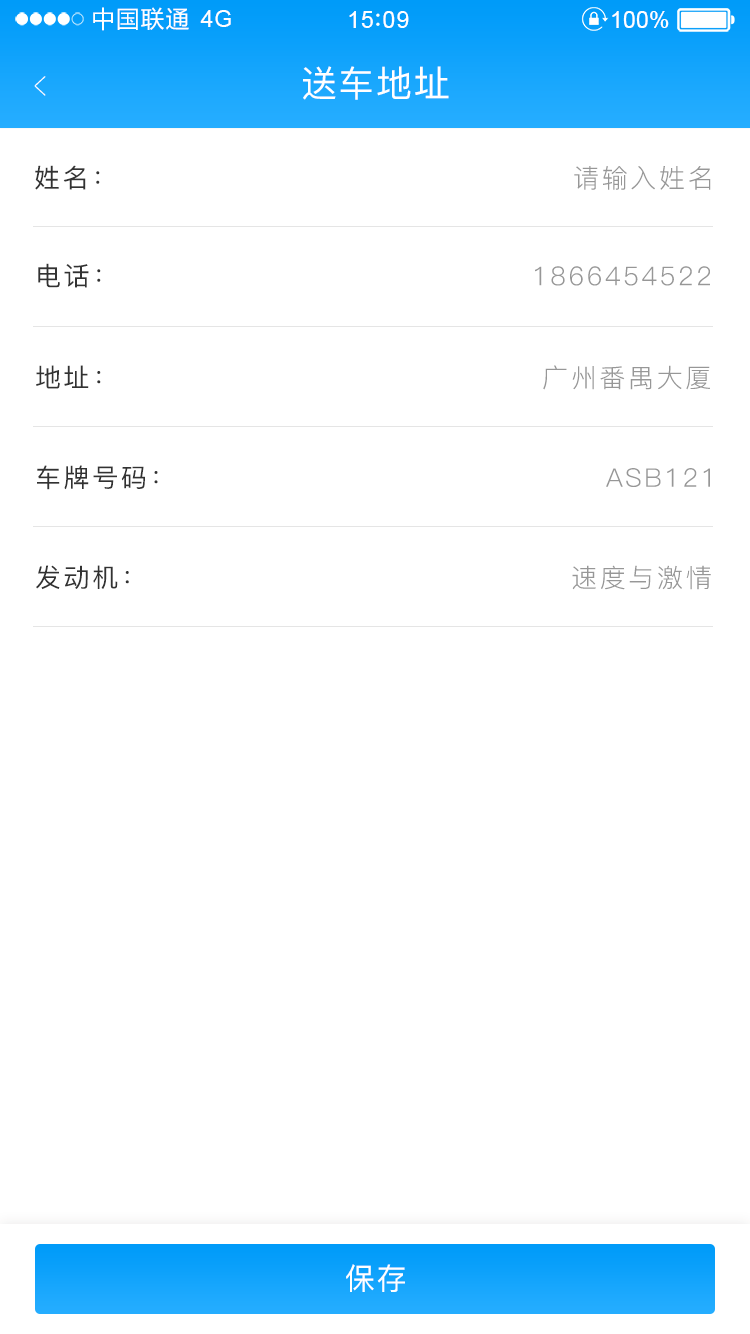
<style>
.page{position:relative;width:750px;height:1334px;background:#ffffff}
.page>*{position:absolute;margin:0}
.t1{font:23.4px "MicrosoftYaHei";letter-spacing:0.06em;color:#ffffff}
.t2{font:23.4px "ArialMT";letter-spacing:0.02em;color:#ffffff}
.t3{font:23.4px "ArialMT";letter-spacing:0.04em;color:#ffffff}
.t4{font:23.4px "ArialMT";color:#ffffff}
.t5{font:39px "PingFang-SC-ExtraLight";letter-spacing:0.1em;color:#ffffff;scale:0.51 1}
.t6{font:36px "PingFang-SC-Medium";letter-spacing:0.05em;color:#ffffff}
.t7{font:26px "PingFang-SC-Medium";letter-spacing:0.1em;color:#333333}
.t8{font:26.1px "PingFang-SC-Regular";letter-spacing:0.1em;color:#979797}
.t9{font:26px "PingFang-SC-Medium";letter-spacing:0.1em;color:#323232}
.t10{font:25.6px "PingFang-SC-Medium";letter-spacing:0.1em;color:#323232}
.t11{font:25.7px "PingFang-SC-Regular";letter-spacing:0.1em;color:#979797}
.t12{font:30px "PingFang-SC-Medium";letter-spacing:0.05em;color:#ffffff}
</style>
<div class="page">
<p class="t1" style="left:93px;top:7px;width:96px;height:24px">中国联通</p>
<p class="t2" style="left:200px;top:10px;width:31px;height:17px">4G</p>
<p class="t3" style="left:349px;top:11px;width:60px;height:17px">15 09</p>
<p class="t4" style="left:612px;top:11px;width:57px;height:17px">100%</p>
<p class="t5" style="left:34px;top:76px;width:12px;height:20px;rotate:180deg">&gt;</p>
<p class="t6" style="left:303px;top:66px;width:146px;height:34px">送车地址</p>
<p class="t7" style="left:35px;top:165px;width:65px;height:25px">姓名：</p>
<p class="t8" style="left:574px;top:166px;width:137px;height:24px">请输入姓名</p>
<p class="t9" style="left:38px;top:263px;width:63px;height:25px">电话：</p>
<p class="t8" style="left:535px;top:266px;width:175px;height:20px">1866454522</p>
<p class="t10" style="left:36px;top:365px;width:65px;height:24px">地址：</p>
<p class="t11" style="left:543px;top:365px;width:167px;height:25px">广州番禺大厦</p>
<p class="t10" style="left:37px;top:465px;width:121px;height:25px">车牌号码：</p>
<p class="t11" style="left:606px;top:468px;width:104px;height:19px">ASB121</p>
<p class="t10" style="left:36px;top:565px;width:93px;height:25px">发动机：</p>
<p class="t11" style="left:572px;top:565px;width:139px;height:25px">速度与激情</p>
<p class="t12" style="left:346px;top:1264px;width:59px;height:28px">保存</p>
</div>
